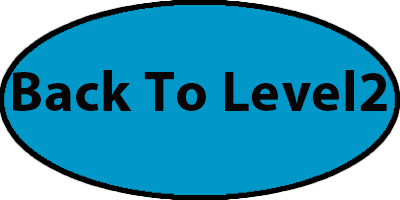
<style>
.page{position:relative;width:400px;height:200px;background:#0098c8}
.page>*{position:absolute;margin:0}
.t1{font:56.7px "MyriadPro-Bold";letter-spacing:0.01em;color:#0a0304}
</style>
<div class="page">
<p class="t1" style="left:13px;top:70px;width:374px;height:41px">Back To Level2</p>
</div>
